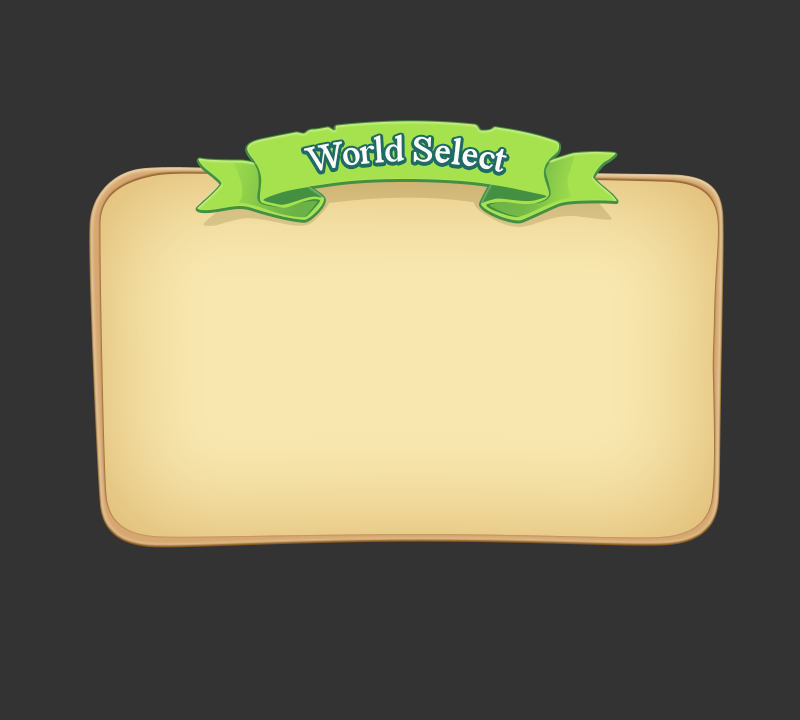
<style>
.page{position:relative;width:800px;height:720px;background:#333333}
.page>*{position:absolute;margin:0}
.t1{font:38px "TimesNewRomanPSMT";letter-spacing:-0.02em;color:#ffffff}
</style>
<div class="page">
<p class="t1" style="left:303px;top:134px;width:204px;height:38px">World Select</p>
</div>
